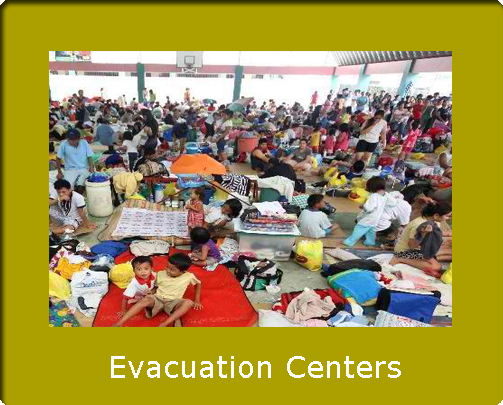
<style>
.page{position:relative;width:503px;height:405px;background:#aba000}
.page>*{position:absolute;margin:0}
.t1{font:30px "Verdana";color:#ffffff}
</style>
<div class="page">
<p class="t1" style="left:111px;top:356px;width:290px;height:22px">Evacuation Centers</p>
</div>
